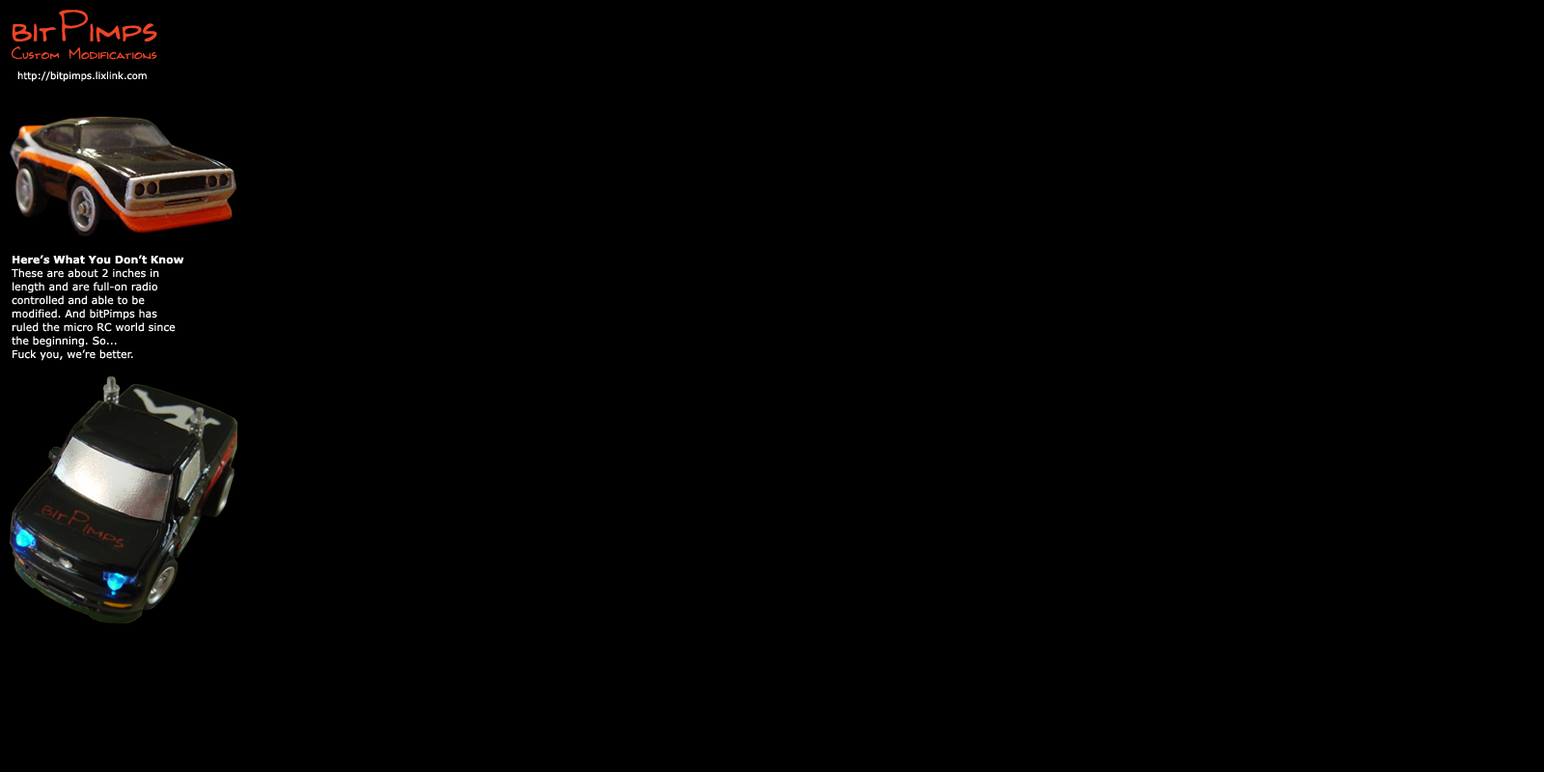
<style>
.page{position:relative;width:1544px;height:772px;background:#000000}
.page>*{position:absolute;margin:0}
.t1{font:46.3px "Kilroy-WasHere";color:#ef4427}
.t2{font:17.4px "Kilroy-WasHere";color:#ef4427}
.t3{font:9.7px "Verdana";color:#ffffff}
.t4{font:10.6px/13.5px "Verdana";color:#ffffff}
.t5{font:10.6px/13.5px "Verdana-Bold";color:#ffffff}
</style>
<div class="page">
<p class="t1" style="left:12px;top:10px;width:145px;height:32px">bitPimps</p>
<p class="t2" style="left:12px;top:46px;width:145px;height:14px">Custom Modifications</p>
<p class="t3" style="left:17px;top:71px;width:130px;height:11px">http://bitpimps.lixlink.com</p>
<p class="t4" style="left:12px;top:255px;width:172px;height:106px"><span class="t5">Here’s What You Don’t Know<br></span>These are about 2 inches in<br>length and are full-on radio<br>controlled and able to be<br>modified. And bitPimps has <br>ruled the micro RC world since<br>the beginning. So...<br>Fuck you, we’re better.</p>
</div>
